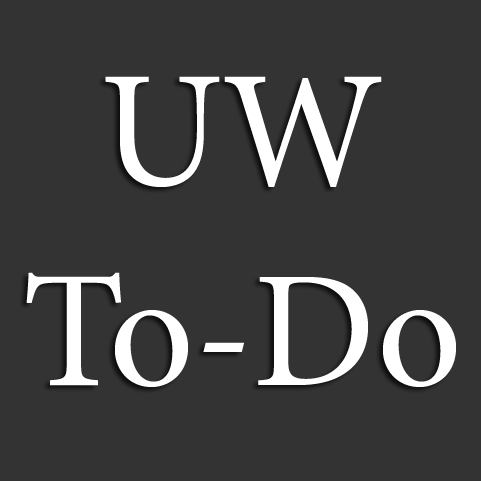
<style>
.page{position:relative;width:481px;height:481px;background:#333333}
.page>*{position:absolute;margin:0}
.t1{font:166.7px "MinionPro-Regular";color:#ffffff}
</style>
<div class="page">
<p class="t1" style="left:26px;top:76px;width:430px;height:311px;text-align:center">UW<br>To-Do</p>
</div>
